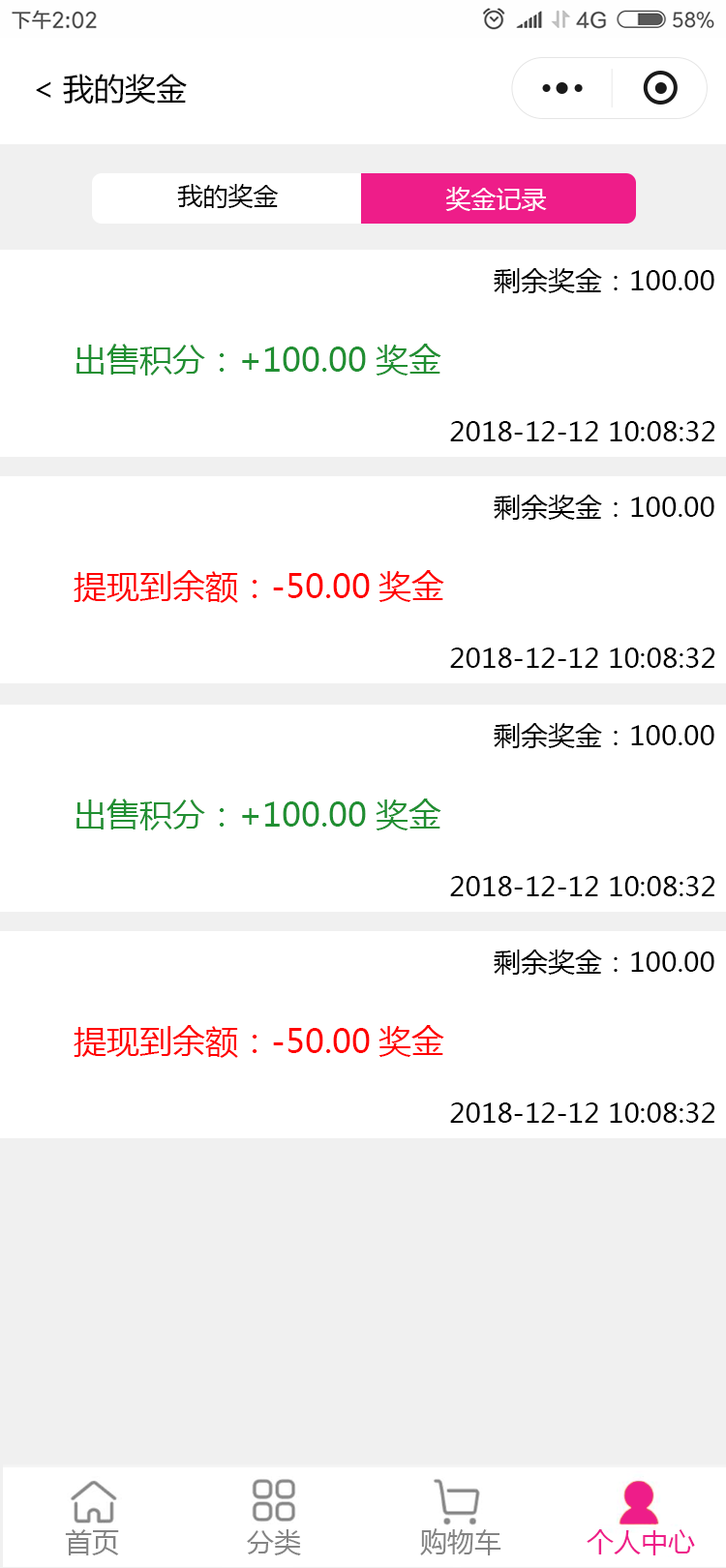
<style>
.page{position:relative;width:726px;height:1568px;background:#ffffff}
.page>*{position:absolute;margin:0}
.t1{font:31px "MicrosoftYaHei";color:#000000}
.t2{font:25.2px "MicrosoftYaHei";color:#010101}
.t3{font:25.2px "MicrosoftYaHei";color:#ffffff}
.t4{font:27.1px "MicrosoftYaHei";color:#000000}
.t5{font:32.9px "MicrosoftYaHei";color:#208f32}
.t6{font:32.9px "MicrosoftYaHei";color:#ff0101}
</style>
<div class="page">
<p class="t1" style="left:36px;top:74px;width:151px;height:31px">&lt;我的奖金</p>
<p class="t2" style="left:177px;top:184px;width:102px;height:24px">我的奖金</p>
<p class="t3" style="left:445px;top:187px;width:102px;height:24px">奖金记录</p>
<p class="t4" style="left:494px;top:268px;width:220px;height:25px">剩余奖金：100.00</p>
<p class="t5" style="left:76px;top:344px;width:365px;height:32px">出售积分：+100.00奖金</p>
<p class="t4" style="left:450px;top:421px;width:264px;height:20px">2018-12-12 10:08:32</p>
<p class="t4" style="left:494px;top:495px;width:220px;height:25px">剩余奖金：100.00</p>
<p class="t6" style="left:74px;top:570px;width:370px;height:33px">提现到余额：-50.00奖金</p>
<p class="t4" style="left:450px;top:648px;width:264px;height:20px">2018-12-12 10:08:32</p>
<p class="t4" style="left:494px;top:723px;width:220px;height:25px">剩余奖金：100.00</p>
<p class="t5" style="left:76px;top:799px;width:365px;height:31px">出售积分：+100.00奖金</p>
<p class="t4" style="left:450px;top:876px;width:264px;height:20px">2018-12-12 10:08:32</p>
<p class="t4" style="left:494px;top:950px;width:220px;height:25px">剩余奖金：100.00</p>
<p class="t6" style="left:74px;top:1025px;width:370px;height:33px">提现到余额：-50.00奖金</p>
<p class="t4" style="left:450px;top:1102px;width:264px;height:21px">2018-12-12 10:08:32</p>
</div>
